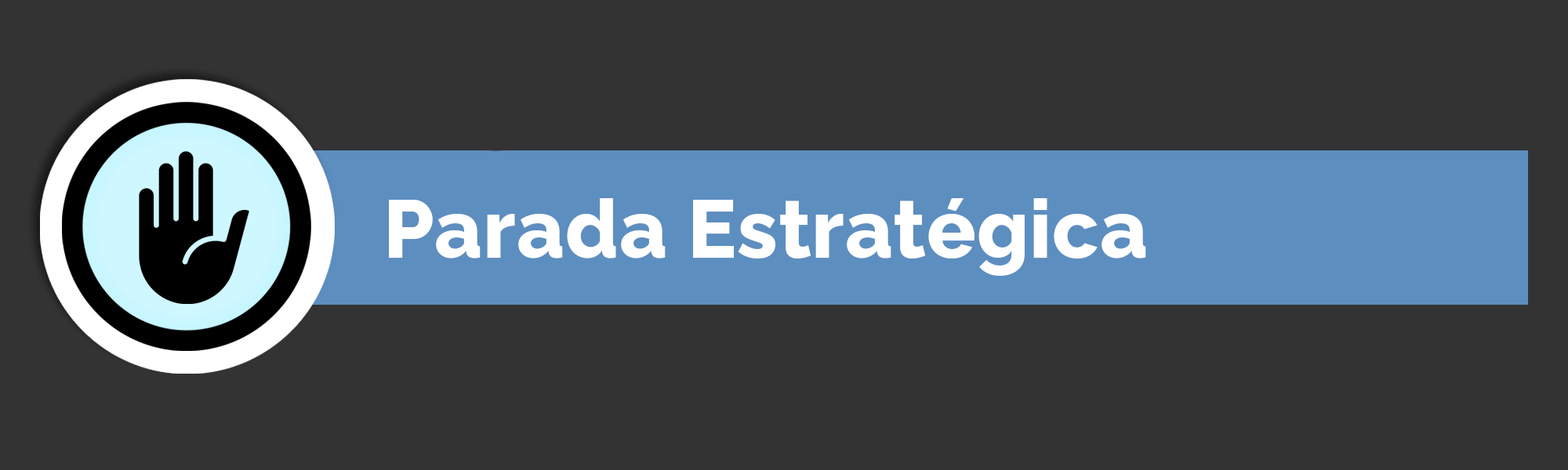
<style>
.page{position:relative;width:1568px;height:470px;background:#333333}
.page>*{position:absolute;margin:0}
.t1{font:81.7px "Rawline-ExtraBold";letter-spacing:0.01em;color:#ffffff}
</style>
<div class="page">
<p class="t1" style="left:389px;top:198px;width:757px;height:78px">Parada Estratégica</p>
</div>
